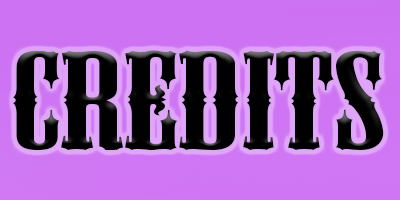
<style>
.page{position:relative;width:400px;height:200px}
.page>*{position:absolute;margin:0}
.t1{font:130.3px "MesquiteStd";color:#000000;scale:1.67 1}
</style>
<div class="page">
<p class="t1" style="left:13px;top:50px;width:371px;height:101px">CREDITS</p>
</div>
